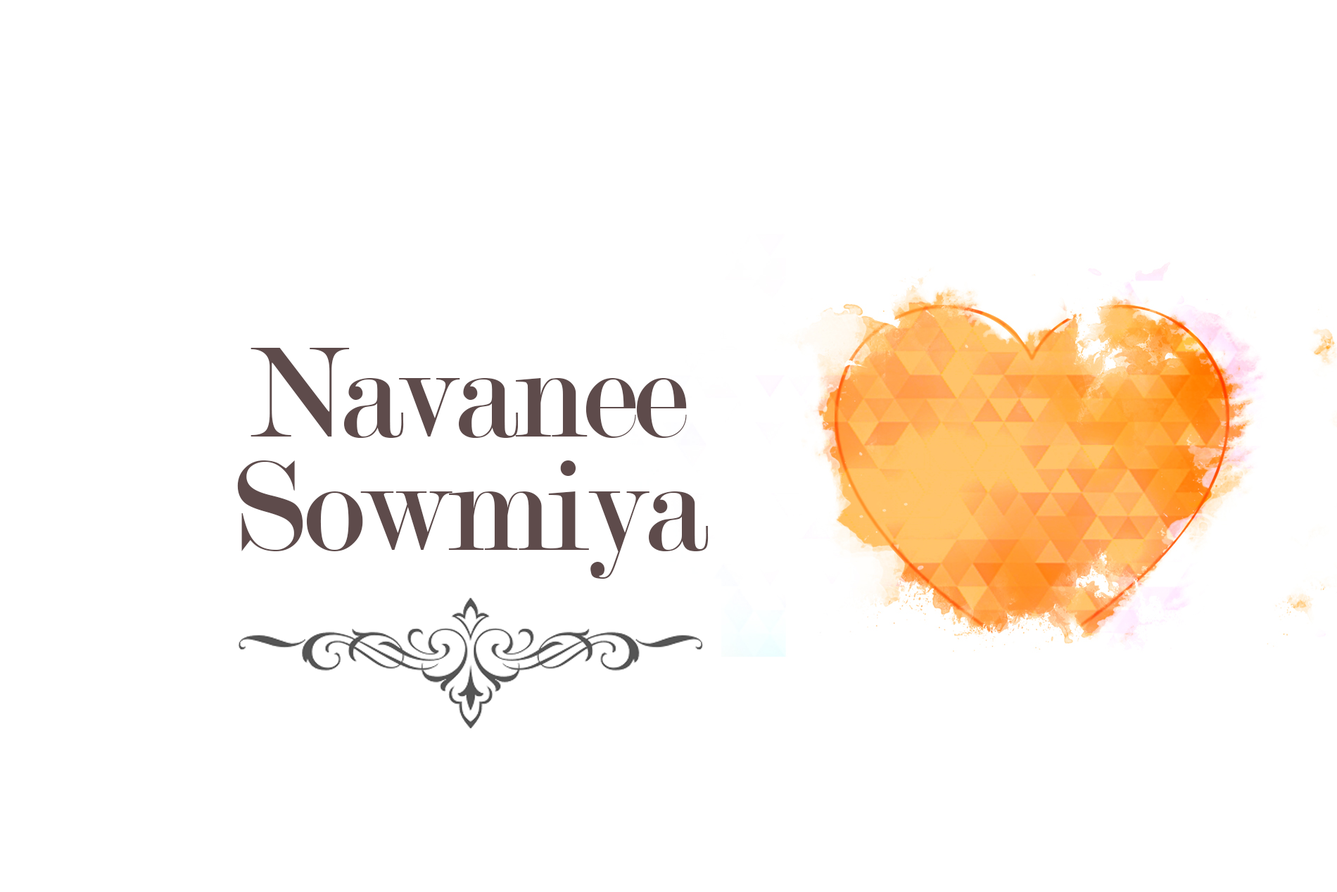
<style>
.page{position:relative;width:1337px;height:892px;background:#ffffff}
.page>*{position:absolute;margin:0}
.t1{font:137.2px "Modern-Regular";letter-spacing:-0.03em;color:#5e4b4b}
</style>
<div class="page">
<p class="t1" style="left:251px;top:348px;width:436px;height:90px">Navanee</p>
<p class="t1" style="left:237px;top:460px;width:472px;height:119px">Sowmiya</p>
</div>
